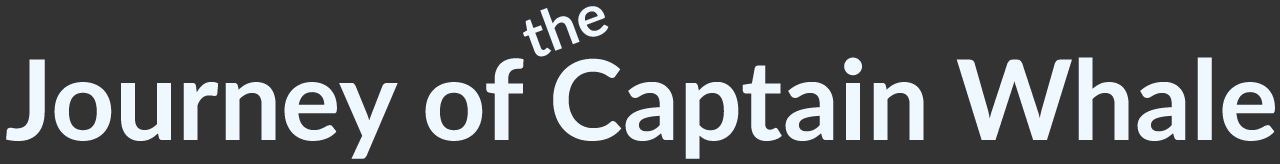
<style>
.page{position:relative;width:1280px;height:164px;background:#333333}
.page>*{position:absolute;margin:0}
.t1{font:57.9px "Lato-Bold";color:#f0f8ff}
.t2{font:110.9px "Lato-Bold";color:#f0f8ff}
</style>
<div class="page">
<p class="t1" style="left:523px;top:6px;width:86px;height:51px;rotate:-20deg">the</p>
<p class="t2" style="left:6px;top:57px;width:1269px;height:102px">Journey of Captain Whale</p>
</div>
